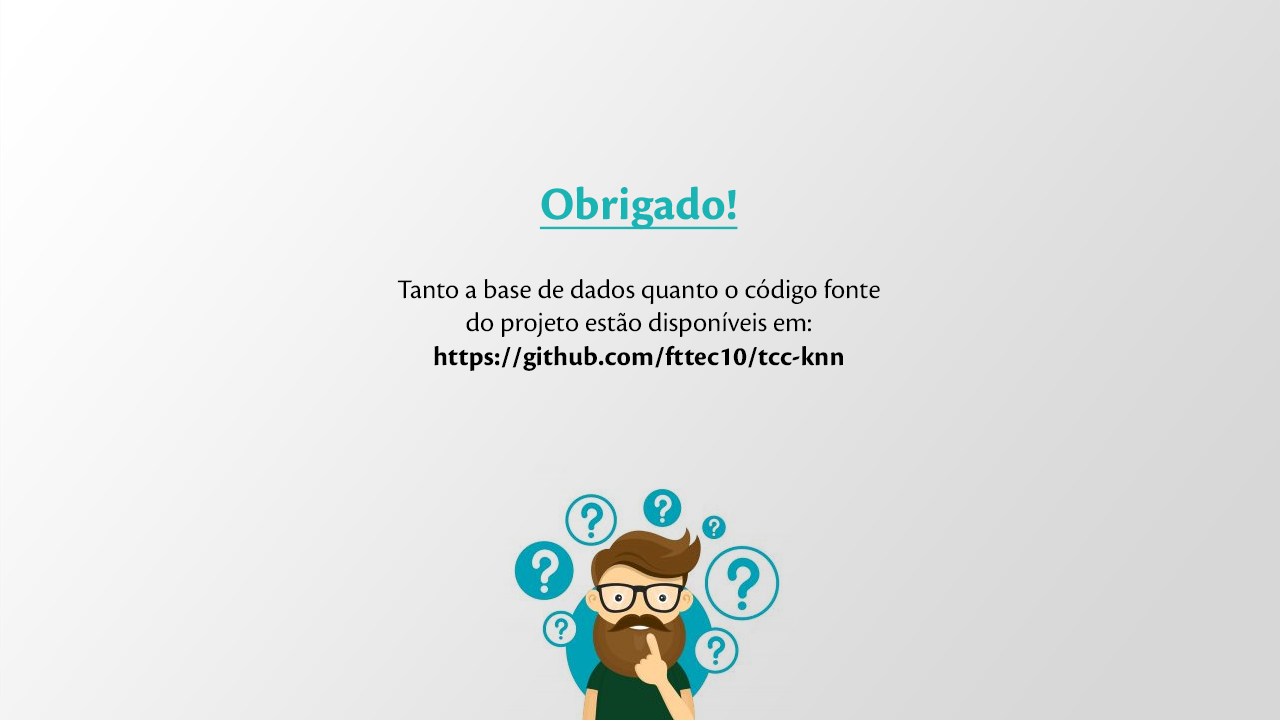
<style>
.page{position:relative;width:1280px;height:720px}
.page>*{position:absolute;margin:0}
.t1{font:48px "CronosPro-Bold";color:#1ab4b4;text-decoration:underline}
.t2{font:28px "CronosPro-Regular";color:#000000}
.t3{font:28px "CronosPro-Bold";color:#000000}
</style>
<div class="page">
<p class="t1" style="left:539px;top:186px;width:199px;height:44px">Obrigado!</p>
<p class="t2" style="left:397px;top:278px;width:483px;height:93px;text-align:center">Tanto a base de dados quanto o código fonte <br>do projeto estão disponíveis em:<br><span class="t3">https://github.com/fttec10/tcc-knn</span></p>
</div>
